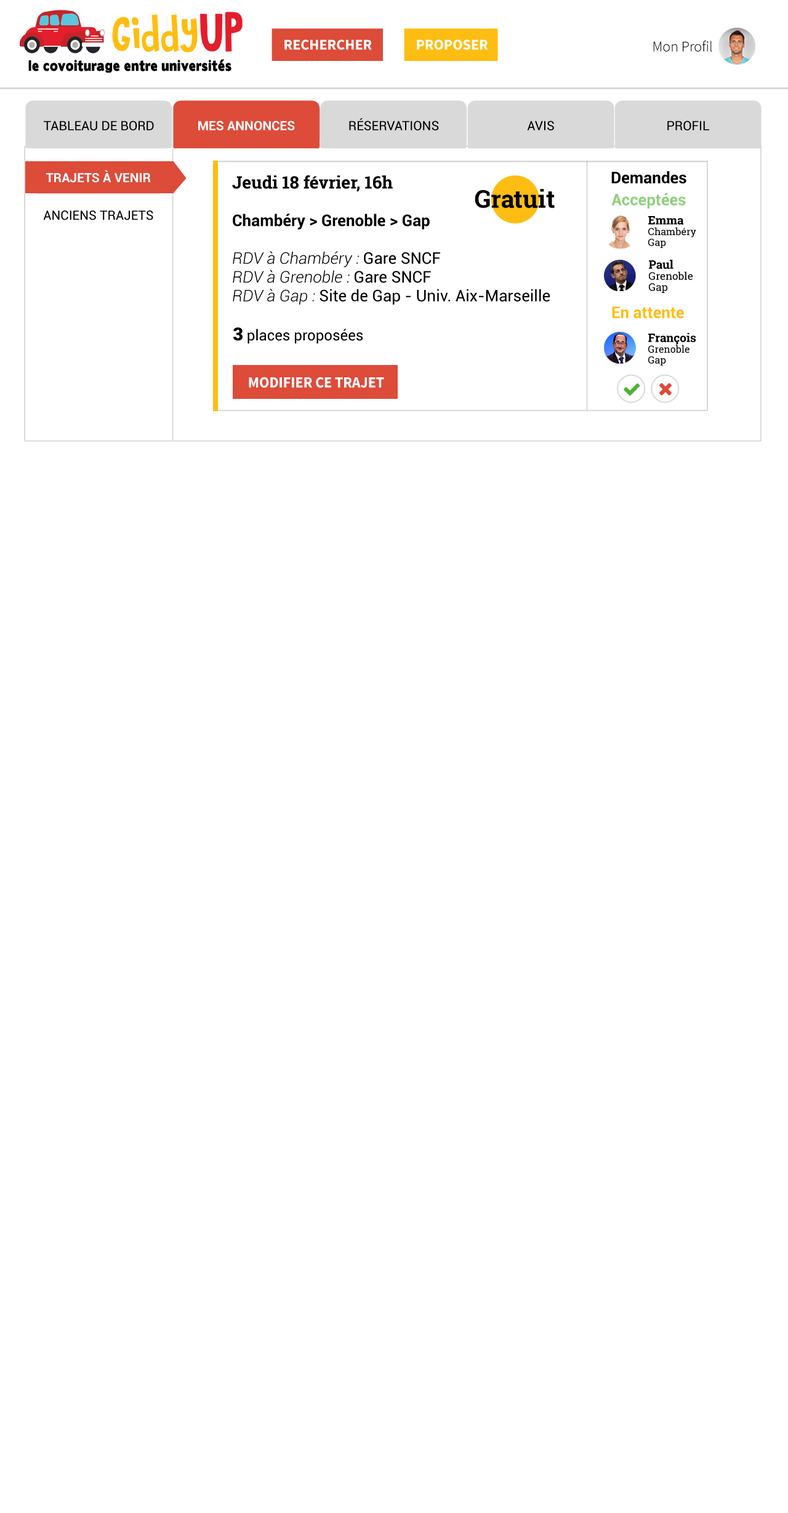
<style>
.page{position:relative;width:788px;height:1513px;background:#ffffff}
.page>*{position:absolute;margin:0}
.t1{font:14.8px "SourceSansPro-Bold";color:#ffffff;text-transform:uppercase}
.t2{font:14.8px "SourceSansPro-Light";color:#000000}
.t3{font:12.9px "Roboto-Regular";color:#000000;text-transform:uppercase}
.t4{font:12.9px "Roboto-Bold";color:#ffffff;text-transform:uppercase}
.t5{font:12.9px/18.8px "Roboto-Bold";color:#ffffff;text-transform:uppercase}
.t6{font:12.9px/18.8px "Roboto-Regular";color:#000000;text-transform:uppercase}
.t7{font:16px "Roboto-Bold";color:#000000}
.t8{font:16px/18.8px "Roboto-Regular";color:#000000}
.t9{font:17.2px/18.8px "RobotoSlab-Bold";color:#000000}
.t10{font:17.2px/18.8px "Roboto-Regular";color:#000000}
.t11{font:16px/18.8px "Roboto-Bold";color:#000000}
.t12{font:16px/18.8px "Roboto-Medium";color:#000000}
.t13{font:16px/18.8px "Roboto-LightItalic";color:#000000}
.t14{font:24.6px "RobotoSlab-Bold";color:#000000}
.t15{font:16px "Roboto-Bold";color:#91cf80}
.t16{font:9.9px/10.8px "RobotoSlab-Regular";color:#000000}
.t17{font:11.7px/10.8px "RobotoSlab-Bold";color:#000000}
.t18{font:10.5px/11.1px "RobotoSlab-Regular";color:#000000}
.t19{font:11.7px/11.1px "RobotoSlab-Bold";color:#000000}
.t20{font:16px "Roboto-Bold";color:#febd12}
.t21{font:14.8px "Roboto-Regular";color:#000000}
.t22{font:17.9px "Roboto-Black";color:#000000}
.t23{font:15.5px "SourceSansPro-Bold";color:#ffffff;text-transform:uppercase;scale:0.95 1}
</style>
<div class="page">
<p class="t1" style="left:284px;top:39px;width:88px;height:11px">Rechercher</p>
<p class="t1" style="left:417px;top:39px;width:71px;height:11px">proposer</p>
<p class="t2" style="left:653px;top:41px;width:59px;height:11px">Mon Profil</p>
<p class="t3" style="left:44px;top:121px;width:110px;height:10px">tableau de bord</p>
<p class="t4" style="left:198px;top:121px;width:97px;height:10px">mes annonces</p>
<p class="t3" style="left:349px;top:118px;width:90px;height:13px">réservations</p>
<p class="t3" style="left:527px;top:121px;width:27px;height:10px">avis</p>
<p class="t3" style="left:667px;top:121px;width:42px;height:10px">profil</p>
<p class="t5" style="left:43px;top:170px;width:110px;height:50px;text-align:center">trajets à venir<br><span class="t6"><br>anciens trajets</span></p>
<p class="t7" style="left:611px;top:171px;width:75px;height:12px">Demandes</p>
<p class="t8" style="left:232px;top:175px;width:318px;height:130px"><span class="t9">Jeudi 18 février, 16h<br></span><span class="t10"><br></span><span class="t11">Chambéry &gt; Grenoble &gt; Gap<br></span><span class="t12"><br></span><span class="t13">RDV à Chambéry : </span>Gare SNCF<br><span class="t13">RDV à Grenoble : </span>Gare SNCF<br><span class="t13">RDV à Gap : </span>Site de Gap - Univ. Aix-Marseille</p>
<p class="t14" style="left:475px;top:189px;width:80px;height:19px">Gratuit</p>
<p class="t15" style="left:611px;top:193px;width:75px;height:16px">Acceptées</p>
<p class="t16" style="left:648px;top:216px;width:48px;height:32px"><span class="t17">Emma<br></span>Chambéry<br>Gap</p>
<p class="t18" style="left:649px;top:260px;width:44px;height:33px"><span class="t19">Paul<br></span>Grenoble<br>Gap</p>
<p class="t20" style="left:612px;top:307px;width:72px;height:11px">En attente</p>
<p class="t21" style="left:233px;top:328px;width:130px;height:16px"><span class="t22">3</span> places proposées</p>
<p class="t16" style="left:648px;top:333px;width:48px;height:33px"><span class="t17">François<br></span>Grenoble<br>Gap</p>
<p class="t23" style="left:249px;top:377px;width:135px;height:11px">modifier ce trajet</p>
</div>
